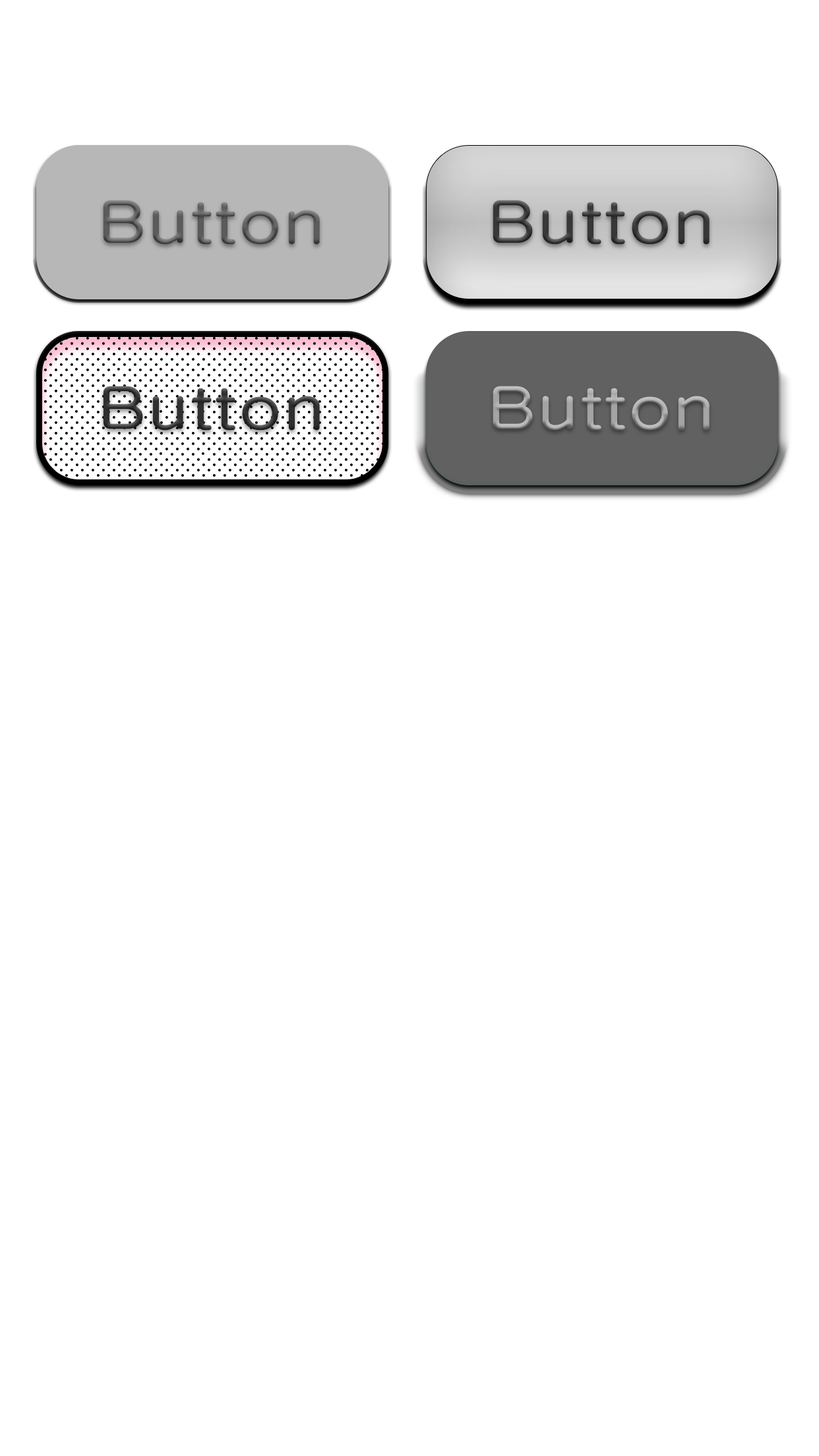
<style>
.page{position:relative;width:819px;height:1456px;background:#ffffff}
.page>*{position:absolute;margin:0}
.t1{font:57px "Gulim";color:#616161;font-weight:bold;scale:1.25 1}
.t2{font:57px "Gulim";color:#3c3c3c;font-weight:bold;scale:1.25 1}
.t3{font:57px "Gulim";color:#333333;font-weight:bold;scale:1.25 1}
.t4{font:57px "Gulim";color:#aeaeae;font-weight:bold;scale:1.25 1}
</style>
<div class="page">
<p class="t1" style="left:103px;top:200px;width:217px;height:45px">Button</p>
<p class="t2" style="left:493px;top:200px;width:217px;height:45px">Button</p>
<p class="t3" style="left:103px;top:386px;width:217px;height:45px">Button</p>
<p class="t4" style="left:493px;top:386px;width:217px;height:45px">Button</p>
</div>
